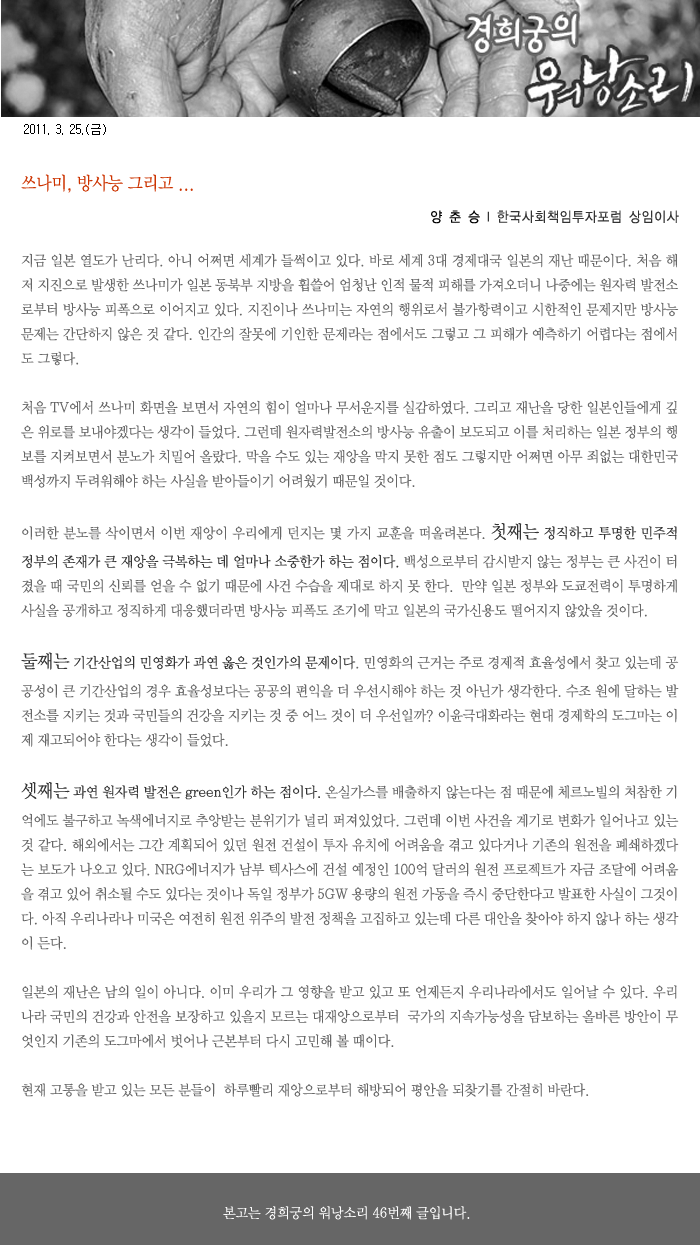
<style>
.page{position:relative;width:700px;height:1245px;background:#ffffff}
.page>*{position:absolute;margin:0}
.t1{font:12px "Gulim";color:#000000}
.t2{font:18px "YDIWebBatan";color:#cc3300;scale:0.9 1}
.t3{font:14px "YDIYGO120-KSCpc-EUC-H";color:#333333;scale:0.9 1}
.t4{font:14px "YDIYGO120-KSCpc-EUC-H";color:#000000;scale:0.9 1}
.t5{font:14px "YDIWebBatan";color:#666666;scale:0.95 1}
.t6{font:18px "YDIWebBatan";color:#333333;scale:0.95 1}
.t7{font:14px "YDIWebBatan";color:#333333;scale:0.95 1}
.t8{font:14px "YDIWebBatan";color:#ffffff;scale:0.95 1}
</style>
<div class="page">
<p class="t1" style="left:24px;top:124px;width:82px;height:11px">2011. 3. 25.(금)</p>
<p class="t2" style="left:21px;top:174px;width:172px;height:19px">쓰나미, 방사능 그리고 ...</p>
<p class="t3" style="left:431px;top:210px;width:248px;height:14px"><span class="t4">양 춘 승 </span>l 한국사회책임투자포럼 상임이사</p>
<p class="t5" style="left:21px;top:253px;width:658px;height:844px;text-align:justify">지금 일본 열도가 난리다. 아니 어쩌면 세계가 들썩이고 있다. 바로 세계 3대 경제대국 일본의 재난 때문이다. 처음 해저 지진으로 발생한 쓰나미가 일본 동북부 지방을 휩쓸어 엄청난 인적 물적 피해를 가져오더니 나중에는 원자력 발전소로부터 방사능 피폭으로 이어지고 있다. 지진이나 쓰나미는 자연의 행위로서 불가항력이고 시한적인 문제지만 방사능 문제는 간단하지 않은 것 같다. 인간의 잘못에 기인한 문제라는 점에서도 그렇고 그 피해가 예측하기 어렵다는 점에서도 그렇다.<br><br>처음 TV에서 쓰나미 화면을 보면서 자연의 힘이 얼마나 무서운지를 실감하였다. 그리고 재난을 당한 일본인들에게 깊은 위로를 보내야겠다는 생각이 들었다. 그런데 원자력발전소의 방사능 유출이 보도되고 이를 처리하는 일본 정부의 행보를 지켜보면서 분노가 치밀어 올랐다. 막을 수도 있는 재앙을 막지 못한 점도 그렇지만 어쩌면 아무 죄없는 대한민국 백성까지 두려워해야 하는 사실을 받아들이기 어려웠기 때문일 것이다. <br><br>이러한 분노를 삭이면서 이번 재앙이 우리에게 던지는 몇 가지 교훈을 떠올려본다. <span class="t6">첫째는</span><span class="t7"> 정직하고 투명한 민주적 정부의 존재가 큰 재앙을 극복하는 데 얼마나 소중한가 하는 점이다. </span>백성으로부터 감시받지 않는 정부는 큰 사건이 터졌을 때 국민의 신뢰를 얻을 수 없기 때문에 사건 수습을 제대로 하지 못 한다.  만약 일본 정부와 도쿄전력이 투명하게 사실을 공개하고 정직하게 대응했더라면 방사능 피폭도 조기에 막고 일본의 국가신용도 떨어지지 않았을 것이다.<br><br><span class="t6">둘째는</span><span class="t7"> 기간산업의 민영화가 과연 옳은 것인가의 문제이다</span>. 민영화의 근거는 주로 경제적 효율성에서 찾고 있는데 공공성이 큰 기간산업의 경우 효율성보다는 공공의 편익을 더 우선시해야 하는 것 아닌가 생각한다. 수조 원에 달하는 발전소를 지키는 것과 국민들의 건강을 지키는 것 중 어느 것이 더 우선일까? 이윤극대화라는 현대 경제학의 도그마는 이제 재고되어야 한다는 생각이 들었다. <br><br><span class="t6">셋째는</span><span class="t7"> 과연 원자력 발전은 green인가 하는 점이다. </span>온실가스를 배출하지 않는다는 점 때문에 체르노빌의 처참한 기억에도 불구하고 녹색에너지로 추앙받는 분위기가 널리 퍼져있었다. 그런데 이번 사건을 계기로 변화가 일어나고 있는 것 같다. 해외에서는 그간 계획되어 있던 원전 건설이 투자 유치에 어려움을 겪고 있다거나 기존의 원전을 폐쇄하겠다는 보도가 나오고 있다. NRG에너지가 남부 텍사스에 건설 예정인 100억 달러의 원전 프로젝트가 자금 조달에 어려움을 겪고 있어 취소될 수도 있다는 것이나 독일 정부가 5GW 용량의 원전 가동을 즉시 중단한다고 발표한 사실이 그것이다. 아직 우리나라나 미국은 여전히 원전 위주의 발전 정책을 고집하고 있는데 다른 대안을 찾아야 하지 않나 하는 생각이 든다. <br><br>일본의 재난은 남의 일이 아니다. 이미 우리가 그 영향을 받고 있고 또 언제든지 우리나라에서도 일어날 수 있다. 우리나라 국민의 건강과 안전을 보장하고 있을지 모르는 대재앙으로부터  국가의 지속가능성을 담보하는 올바른 방안이 무엇인지 기존의 도그마에서 벗어나 근본부터 다시 고민해 볼 때이다. <br><br>현재 고통을 받고 있는 모든 분들이  하루빨리 재앙으로부터 해방되어 평안을 되찾기를 간절히 바란다.</p>
<p class="t8" style="left:223px;top:1206px;width:247px;height:14px">본고는 경희궁의 워낭소리 46번째 글입니다.</p>
</div>
